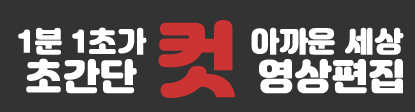
<style>
.page{position:relative;width:415px;height:112px;background:#333333}
.page>*{position:absolute;margin:0}
.t1{font:28px "JalnanOTF";letter-spacing:0.003em;color:#ffffff;font-weight:bold}
.t2{font:36px "JalnanOTF";letter-spacing:0.003em;color:#ffffff;font-weight:bold}
.t3{font:81px "JalnanOTF";letter-spacing:0.003em;color:#cc3333;font-weight:bold}
</style>
<div class="page">
<p class="t1" style="left:18px;top:27px;width:386px;height:28px">1분 1초가            아까운 세상</p>
<p class="t2" style="left:26px;top:20px;width:377px;height:78px">초간단  <span class="t3">컷   </span>영상편집</p>
</div>
